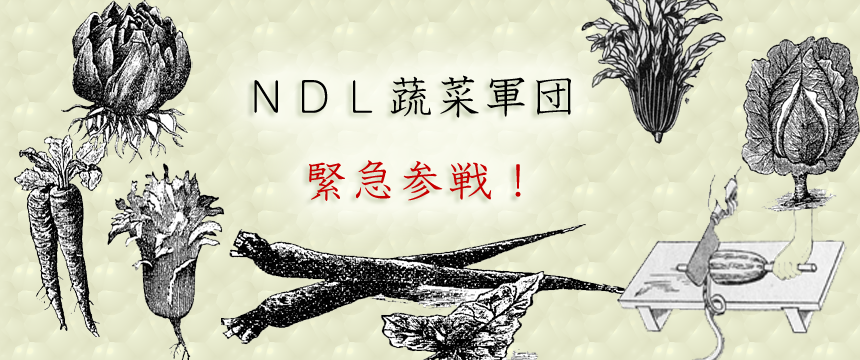
<style>
.page{position:relative;width:860px;height:360px}
.page>*{position:absolute;margin:0}
.t1{font:48px "HGKyokashotai";color:#000000}
.t2{font:48px "HGKyokashotai";color:#c70000}
</style>
<div class="page">
<p class="t1" style="left:254px;top:75px;width:317px;height:126px;text-align:center">ＮＤＬ蔬菜軍団<br> <span class="t2">緊急参戦！</span></p>
</div>
